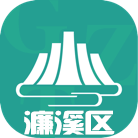
<style>
.page{position:relative;width:138px;height:138px;background:#249f92}
.page>*{position:absolute;margin:0}
.t1{font:25.2px "FZHZGBJW--GB1-0";color:#ffffff;scale:1.21 1}
</style>
<div class="page">
<p class="t1" style="left:24px;top:110px;width:91px;height:25px">濂溪区</p>
</div>
